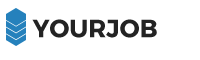
<style>
.page{position:relative;width:200px;height:60px;background:#ffffff}
.page>*{position:absolute;margin:0}
.t1{font:25px "Montserrat-Bold";color:#232323}
</style>
<div class="page">
<p class="t1" style="left:32px;top:19px;width:125px;height:19px">YOURJOB</p>
</div>
